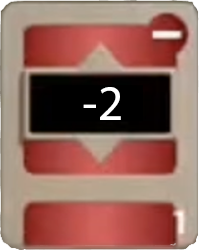
<style>
.page{position:relative;width:199px;height:250px}
.page>*{position:absolute;margin:0}
.t1{font:50px "MyriadPro-Regular";color:#ffffff}
</style>
<div class="page">
<p class="t1" style="left:83px;top:87px;width:38px;height:33px">-2</p>
</div>
